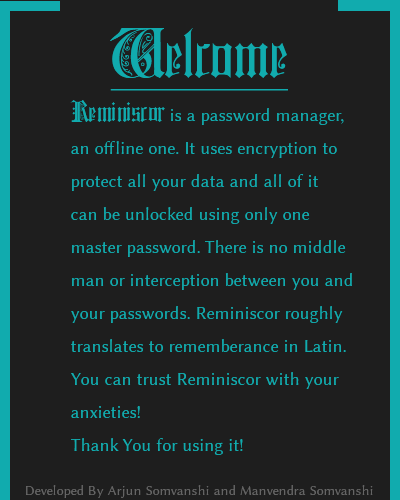
<style>
.page{position:relative;width:400px;height:500px;background:#1e1e1e}
.page>*{position:absolute;margin:0}
.t1{font:72px "ColchesterBlack";color:#11abae;text-decoration:underline}
.t2{font:18px/11px "LinuxBiolinumG";color:#11abae}
.t3{font:30px/11px "ColchesterBlack";color:#11abae}
.t4{font:14px "LinuxBiolinumG";color:#656565}
</style>
<div class="page">
<p class="t1" style="left:110px;top:28px;width:178px;height:63px">Welcome</p>
<p class="t2" style="left:70px;top:100px;width:282px;height:355px"><span class="t3">Reminiscor </span>is a password manager, <br><br><br>an offline one. It uses encryption to <br><br><br>protect all your data and all of it<br><br><br>can be unlocked using only one <br><br><br>master password. There is no middle <br><br><br>man or interception between you and<br><br><br>your passwords. Reminiscor roughly<br><br><br>translates to rememberance in Latin.<br> <br><br>You can trust Reminiscor with your <br><br><br>anxieties!<br><br><br>Thank You for using it!</p>
<p class="t4" style="left:26px;top:485px;width:347px;height:13px">Developed By Arjun Somvanshi and Manvendra Somvanshi</p>
</div>
